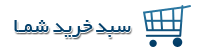
<style>
.page{position:relative;width:200px;height:50px;background:#ffffff}
.page>*{position:absolute;margin:0}
.t1{font:22.1px "BYekan";color:#05416c}
</style>
<div class="page">
<p class="t1" style="left:14px;top:20px;width:117px;height:17px">سبد خرید شمـا</p>
</div>
